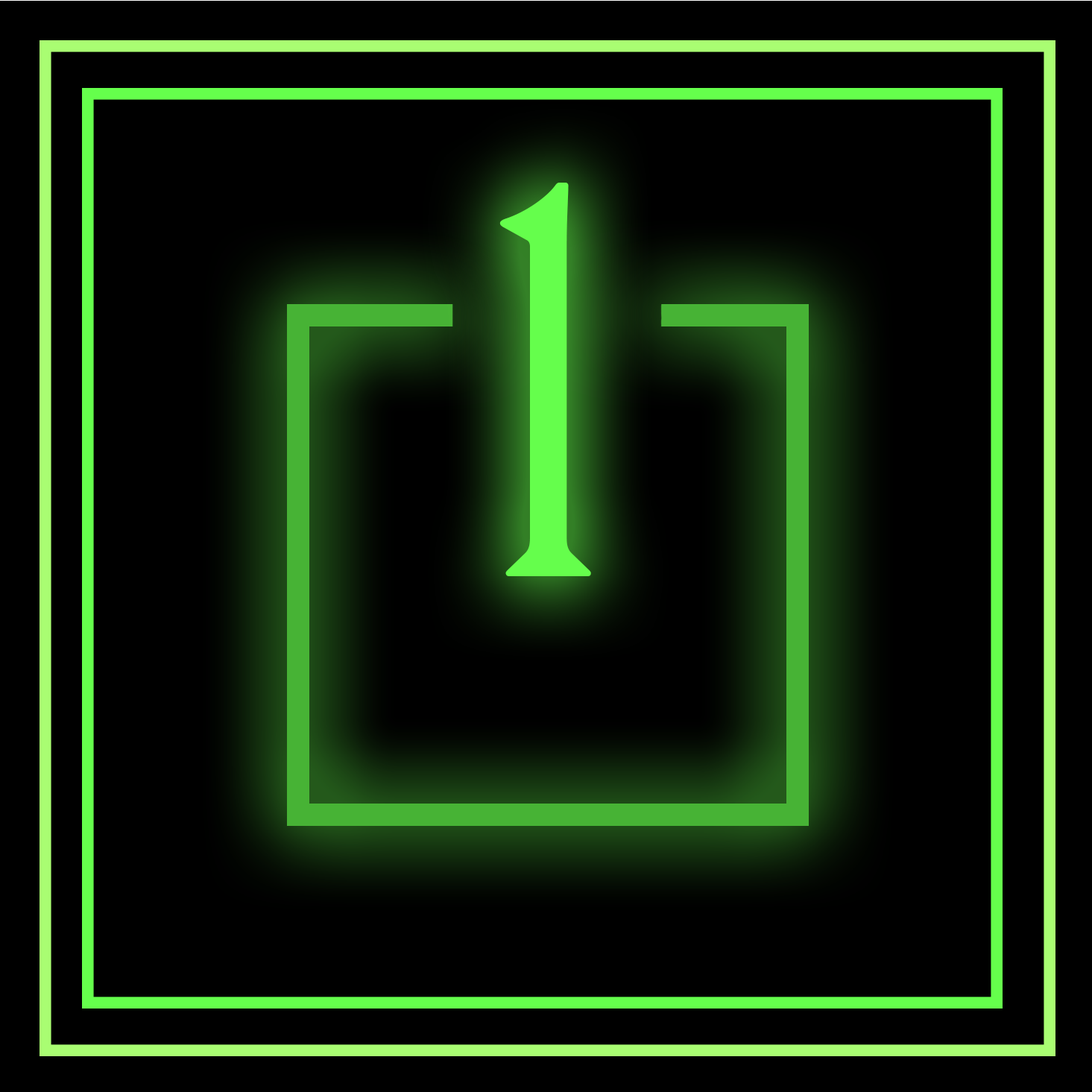
<style>
.page{position:relative;width:1092px;height:1092px;background:#000000}
.page>*{position:absolute;margin:0}
.t1{font:524.9px "BirchStd";color:#65fe4c}
</style>
<div class="page">
<p class="t1" style="left:499px;top:183px;width:92px;height:393px">1</p>
</div>
